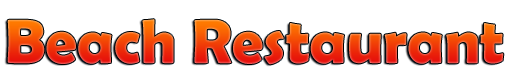
<style>
.page{position:relative;width:512px;height:83px;background:#ffffff}
.page>*{position:absolute;margin:0}
.t1{font:63px "BerlinSansFBDemi-Bold"}
</style>
<div class="page">
<p class="t1" style="left:7px;top:19px;width:497px;height:46px">Beach Restaurant</p>
</div>
